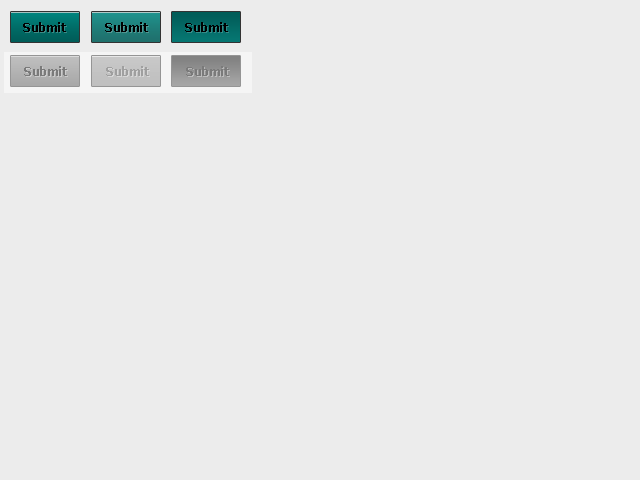
<style>
.page{position:relative;width:640px;height:480px;background:#ececec}
.page>*{position:absolute;margin:0}
.t1{font:12px "Verdana-Bold";letter-spacing:-0.04em;color:#000000}
.t2{font:12px "Verdana-Bold";letter-spacing:-0.04em;color:#7a7a7a}
.t3{font:12px "Verdana-Bold";letter-spacing:-0.04em;color:#9f9f9f}
</style>
<div class="page">
<p class="t1" style="left:23px;top:22px;width:43px;height:10px">Submit</p>
<p class="t1" style="left:105px;top:22px;width:43px;height:10px">Submit</p>
<p class="t1" style="left:185px;top:22px;width:43px;height:10px">Submit</p>
<p class="t2" style="left:24px;top:66px;width:43px;height:10px">Submit</p>
<p class="t3" style="left:106px;top:66px;width:43px;height:10px">Submit</p>
<p class="t2" style="left:186px;top:66px;width:43px;height:10px">Submit</p>
</div>
